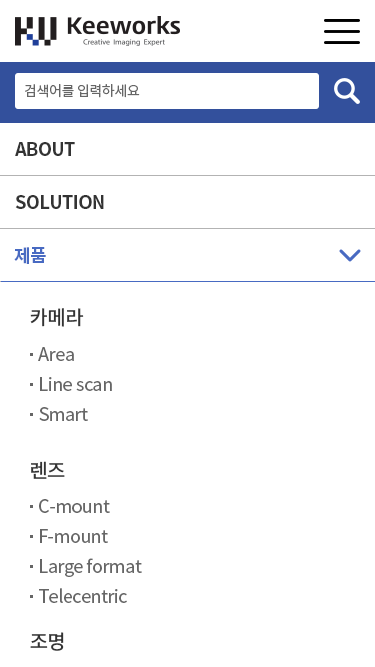
<style>
.page{position:relative;width:375px;height:667px;background:#ffffff}
.page>*{position:absolute;margin:0}
.t1{font:14px "NotoSansCJKkr-Regular";letter-spacing:-0.025em;color:#666666}
.t2{font:18px "NotoSansCJKkr-Bold";letter-spacing:-0.025em;color:#333333;text-transform:uppercase}
.t3{font:18px "NotoSansCJKkr-Bold";letter-spacing:-0.025em;color:#486ac2;text-transform:uppercase}
.t4{font:20px "NotoSansCJKkr-Medium";letter-spacing:-0.025em;color:#333333}
.t5{font:18px/30px "NotoSansCJKkr-Regular";letter-spacing:-0.025em;color:#666666}
</style>
<div class="page">
<p class="t1" style="left:25px;top:84px;width:115px;height:14px">검색어를 입력하세요</p>
<p class="t1" style="left:25px;top:84px;width:115px;height:14px">검색어를 입력하세요</p>
<p class="t2" style="left:15px;top:142px;width:60px;height:14px">ABOUT</p>
<p class="t2" style="left:15px;top:142px;width:60px;height:14px">ABOUT</p>
<p class="t2" style="left:15px;top:195px;width:89px;height:14px">SOLUTION</p>
<p class="t2" style="left:15px;top:195px;width:89px;height:14px">SOLUTION</p>
<p class="t3" style="left:14px;top:247px;width:32px;height:17px">제품</p>
<p class="t3" style="left:14px;top:247px;width:32px;height:17px">제품</p>
<p class="t4" style="left:30px;top:308px;width:54px;height:19px">카메라</p>
<p class="t5" style="left:38px;top:347px;width:74px;height:74px">Area<br>Line scan<br>Smart</p>
<p class="t4" style="left:31px;top:461px;width:34px;height:18px">렌즈</p>
<p class="t5" style="left:39px;top:499px;width:103px;height:104px">C-mount<br>F-mount<br>Large format<br>Telecentric</p>
<p class="t4" style="left:30px;top:632px;width:34px;height:19px">조명</p>
</div>
